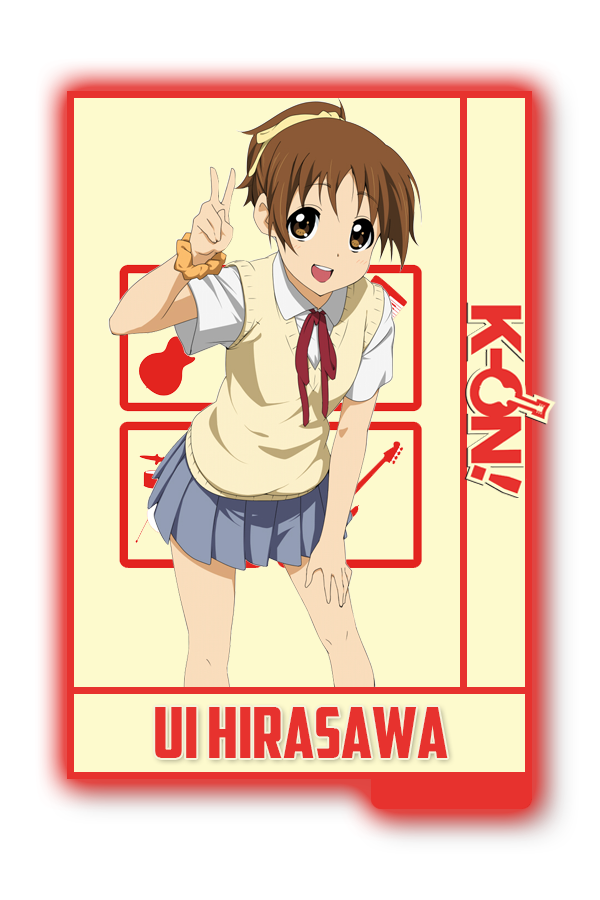
<style>
.page{position:relative;width:600px;height:900px;background:#fdfacd}
.page>*{position:absolute;margin:0}
.t1{font:70.8px "AmericanCaptain";color:#e7322e}
</style>
<div class="page">
<p class="t1" style="left:155px;top:707px;width:293px;height:51px">UI HIRASAWA</p>
</div>
